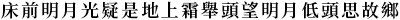
<style>
.page{position:relative;width:400px;height:20px;background:#ffffff}
.page>*{position:absolute;margin:0}
.t1{font:18px "NotoSerifTC-SemiBold";letter-spacing:0.112em;color:#000000}
</style>
<div class="page">
<p class="t1" style="left:1px;top:1px;width:398px;height:18px">床前明月光疑是地上霜舉頭望明月低頭思故鄉</p>
</div>
